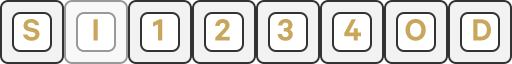
<style>
.page{position:relative;width:512px;height:64px;background:#f2f2f2}
.page>*{position:absolute;margin:0}
.t1{font:34.7px "Calibre-Semibold";letter-spacing:0.01em;color:#c8a65a}
</style>
<div class="page">
<p class="t1" style="left:23px;top:19px;width:17px;height:22px">S</p>
<p class="t1" style="left:93px;top:19px;width:5px;height:22px">I</p>
<p class="t1" style="left:153px;top:19px;width:10px;height:22px">1</p>
<p class="t1" style="left:215px;top:19px;width:15px;height:22px">2</p>
<p class="t1" style="left:277px;top:19px;width:16px;height:22px">3</p>
<p class="t1" style="left:344px;top:19px;width:17px;height:22px">4</p>
<p class="t1" style="left:405px;top:19px;width:21px;height:22px">O</p>
<p class="t1" style="left:473px;top:19px;width:18px;height:22px">D</p>
</div>
